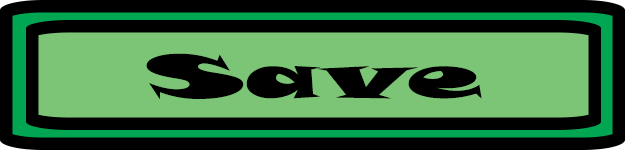
<style>
.page{position:relative;width:625px;height:150px;background:#000000}
.page>*{position:absolute;margin:0}
.t1{font:60px "SnapITC-Regular";color:#000000;scale:2 1}
</style>
<div class="page">
<p class="t1" style="left:146px;top:53px;width:336px;height:46px">Save</p>
</div>
